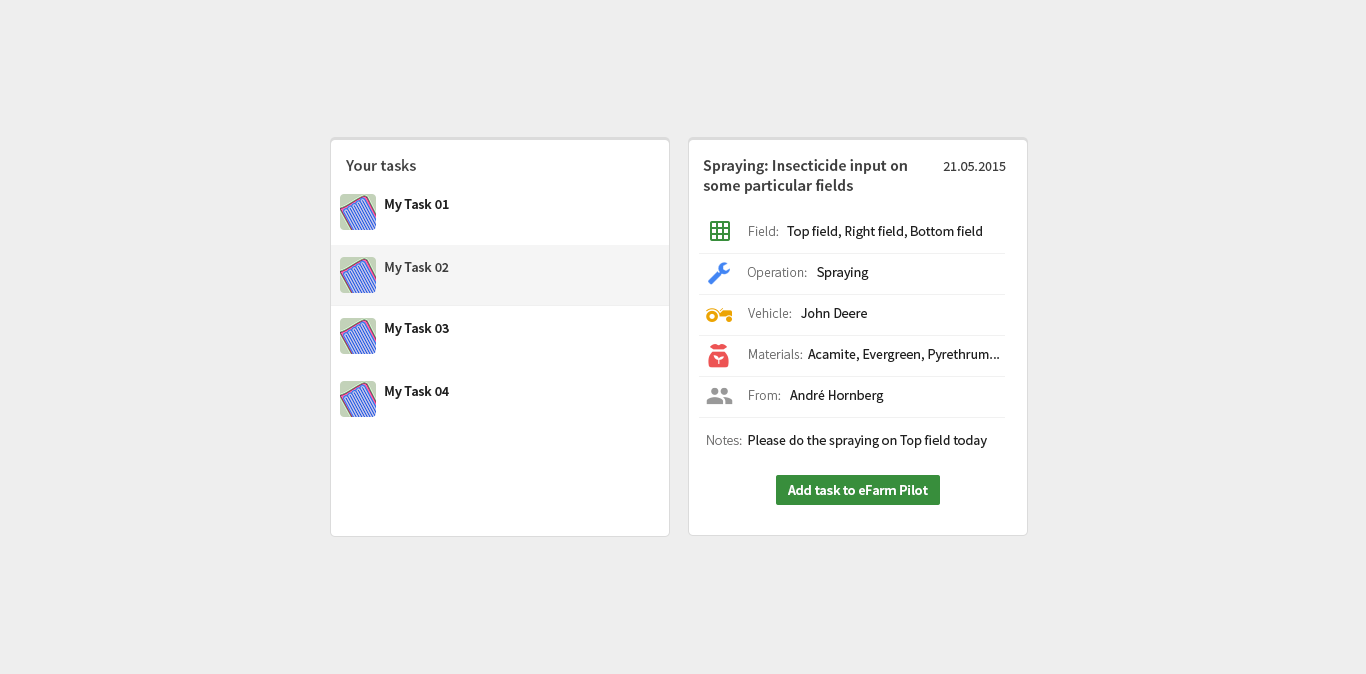
<style>
.page{position:relative;width:1366px;height:674px;background:#eeeeee}
.page>*{position:absolute;margin:0}
.t1{font:16px "SourceSansPro-Semibold";color:#404040}
.t2{font:16px "SourceSansPro-Semibold";color:#3e3e3e}
.t3{font:14px "SourceSansPro-Regular";color:#3e3e3e}
.t4{font:14px "SourceSansPro-Semibold";color:#212121}
.t5{font:14px "SourceSansPro-Light";color:#757575}
.t6{font:14px "SourceSansPro-Regular";color:#212121}
.t7{font:14px "SourceSansPro-Semibold";color:#3d3d3d}
.t8{font:14px "SourceSansPro-Light";color:#212121}
.t9{font:14px "SourceSansPro-Semibold";color:#ffffff}
</style>
<div class="page">
<p class="t1" style="left:346px;top:159px;width:70px;height:12px">Your tasks</p>
<p class="t2" style="left:703px;top:159px;width:204px;height:35px">Spraying: Insecticide input on<br>some particular fields</p>
<p class="t3" style="left:943px;top:162px;width:63px;height:9px">21.05.2015</p>
<p class="t4" style="left:385px;top:199px;width:64px;height:13px">My Task 01</p>
<p class="t5" style="left:749px;top:226px;width:30px;height:10px">Field:</p>
<p class="t6" style="left:787px;top:226px;width:195px;height:13px">Top field, Right field, Bottom field</p>
<p class="t7" style="left:385px;top:262px;width:64px;height:13px">My Task 02</p>
<p class="t5" style="left:747px;top:267px;width:60px;height:13px">Operation:</p>
<p class="t6" style="left:817px;top:267px;width:52px;height:13px">Spraying</p>
<p class="t5" style="left:748px;top:308px;width:44px;height:10px">Vehicle:</p>
<p class="t6" style="left:801px;top:308px;width:66px;height:10px">John Deere</p>
<p class="t4" style="left:385px;top:323px;width:64px;height:13px">My Task 03</p>
<p class="t5" style="left:749px;top:349px;width:54px;height:10px">Materials:</p>
<p class="t6" style="left:808px;top:349px;width:191px;height:13px">Acamite, Evergreen, Pyrethrum...</p>
<p class="t4" style="left:385px;top:386px;width:64px;height:13px">My Task 04</p>
<p class="t5" style="left:749px;top:390px;width:32px;height:10px">From:</p>
<p class="t6" style="left:790px;top:390px;width:94px;height:13px">André Hornberg</p>
<p class="t6" style="left:707px;top:435px;width:280px;height:13px"><span class="t8">Notes:  </span>Please do the spraying on Top field today</p>
<p class="t9" style="left:788px;top:485px;width:140px;height:10px">Add task to eFarm Pilot</p>
</div>
